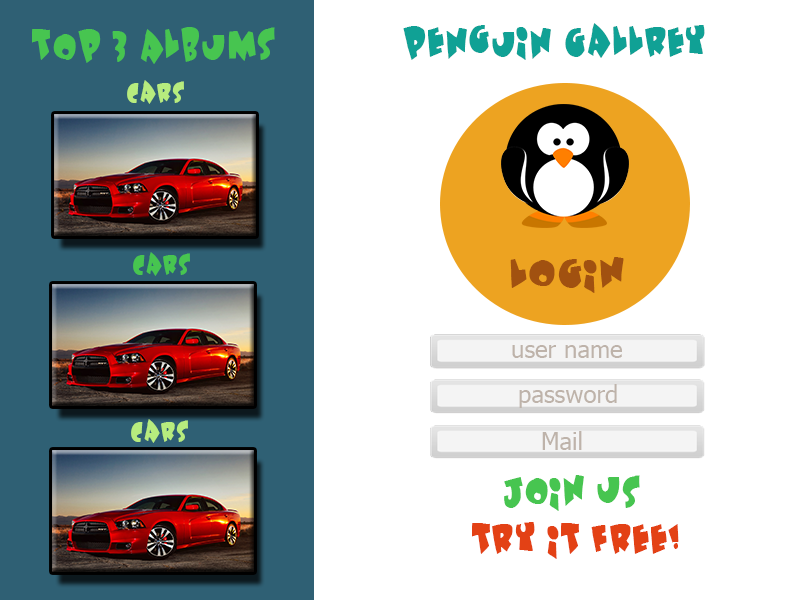
<style>
.page{position:relative;width:800px;height:600px;background:#ffffff}
.page>*{position:absolute;margin:0}
.t1{font:36px "Underattack";color:#47c550}
.t2{font:36px "Underattack";color:#10a195}
.t3{font:24px "Underattack";color:#b7ec7e}
.t4{font:24px "Underattack";color:#47c550}
.t5{font:36.4px "Underattack";color:#a15110;scale:1.14 1}
.t6{font:24px "Tahoma";color:#beb3aa}
.t7{font:24.1px "Tahoma";color:#beb3aa}
.t8{font:36px "Underattack";color:#e34115}
</style>
<div class="page">
<p class="t1" style="left:32px;top:27px;width:243px;height:37px">Top 3 Albums</p>
<p class="t2" style="left:403px;top:23px;width:302px;height:37px">penguin Gallrey</p>
<p class="t3" style="left:127px;top:80px;width:57px;height:24px">cars</p>
<p class="t4" style="left:133px;top:252px;width:57px;height:24px">cars</p>
<p class="t5" style="left:510px;top:257px;width:114px;height:36px">LOGIN</p>
<p class="t6" style="left:512px;top:345px;width:110px;height:13px">user name</p>
<p class="t7" style="left:519px;top:384px;width:98px;height:24px">password</p>
<p class="t3" style="left:131px;top:419px;width:57px;height:24px">cars</p>
<p class="t7" style="left:542px;top:431px;width:40px;height:19px">Mail</p>
<p class="t1" style="left:504px;top:475px;width:136px;height:36px">JOIN US</p>
<p class="t8" style="left:472px;top:522px;width:207px;height:37px">Try IT free!</p>
</div>
